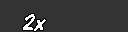
<style>
.page{position:relative;width:128px;height:32px;background:#333333}
.page>*{position:absolute;margin:0}
.t1{font:26px "DomDiagonalBT-Regular";color:#ffffff;scale:1.1 1}
</style>
<div class="page">
<p class="t1" style="left:23px;top:14px;width:23px;height:17px">2x</p>
</div>
